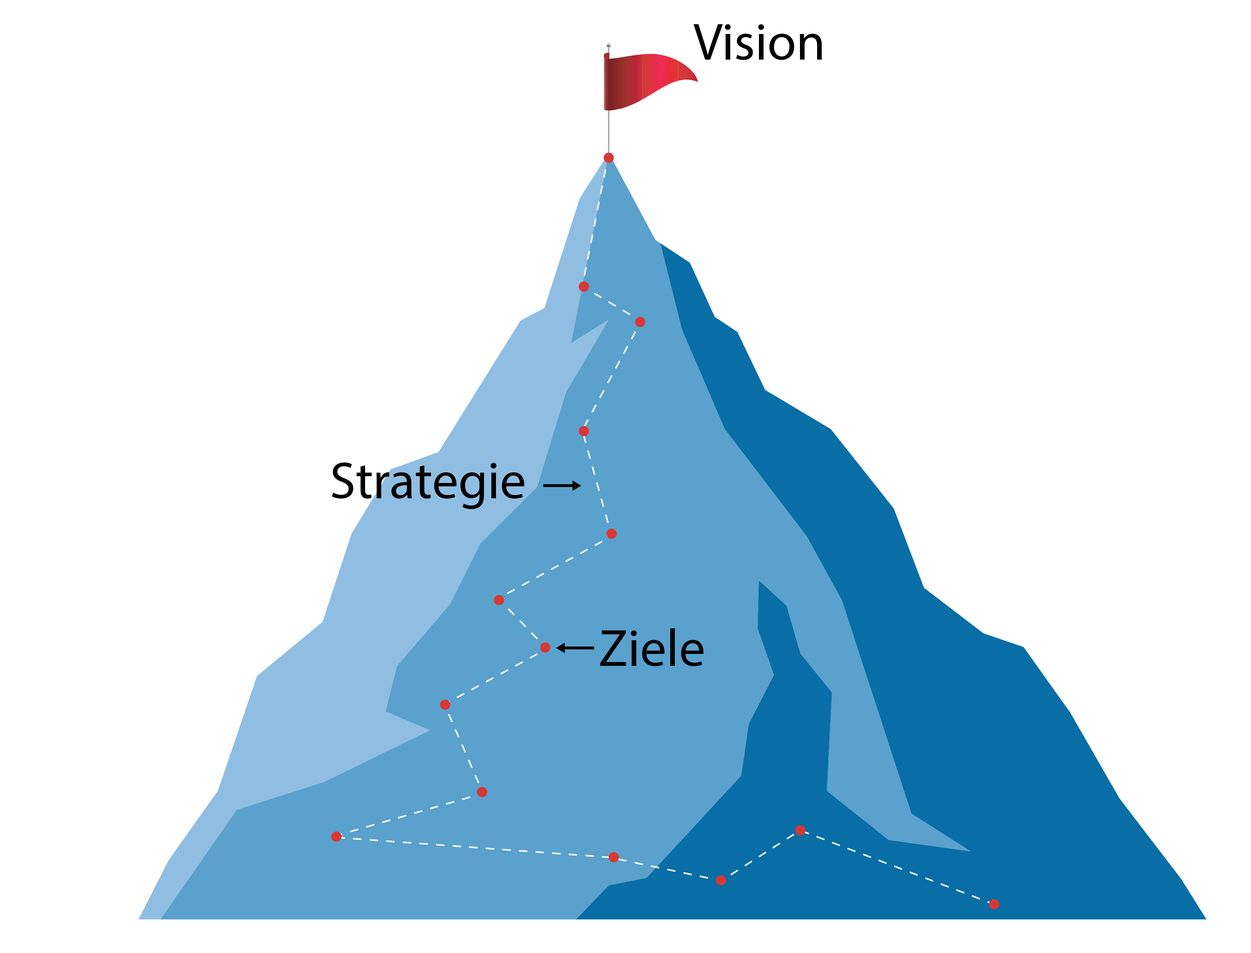
<style>
.page{position:relative;width:1251px;height:953px;background:#ffffff}
.page>*{position:absolute;margin:0}
.t1{font:52.6px "MyriadPro-Regular";color:#000000}
</style>
<div class="page">
<p class="t1" style="left:693px;top:24px;width:129px;height:36px">Vision</p>
<p class="t1" style="left:332px;top:463px;width:192px;height:46px">Strategie</p>
<p class="t1" style="left:600px;top:628px;width:104px;height:38px">Ziele</p>
</div>
